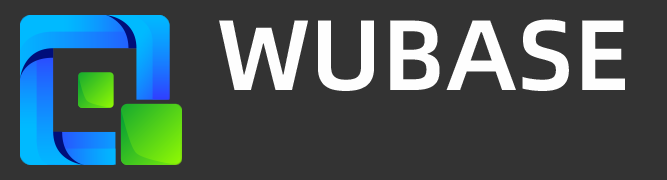
<style>
.page{position:relative;width:667px;height:180px;background:#333333}
.page>*{position:absolute;margin:0}
.t1{font:100px "AlibabaPuHuiTi_3_75_SemiBold";color:#fefefe}
</style>
<div class="page">
<p class="t1" style="left:219px;top:19px;width:406px;height:72px">WUBASE</p>
</div>
